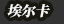
<style>
.page{position:relative;width:64px;height:24px;background:#333333}
.page>*{position:absolute;margin:0}
.t1{font:14px "SourceHanSerifSC-Heavy";color:#f8f8f8;font-style:italic}
</style>
<div class="page">
<p class="t1" style="left:7px;top:3px;width:43px;height:15px">埃尔卡</p>
</div>
